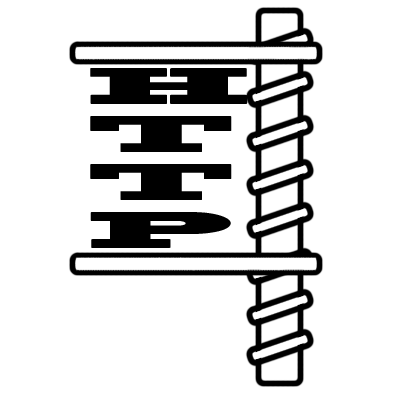
<style>
.page{position:relative;width:393px;height:393px;background:#ffffff}
.page>*{position:absolute;margin:0}
.t1{font:48px/48px "BlackoakStd";color:#000000;scale:1.65 1}
</style>
<div class="page">
<p class="t1" style="left:90px;top:68px;width:158px;height:180px">H<br>T<br>T<br>P</p>
</div>
